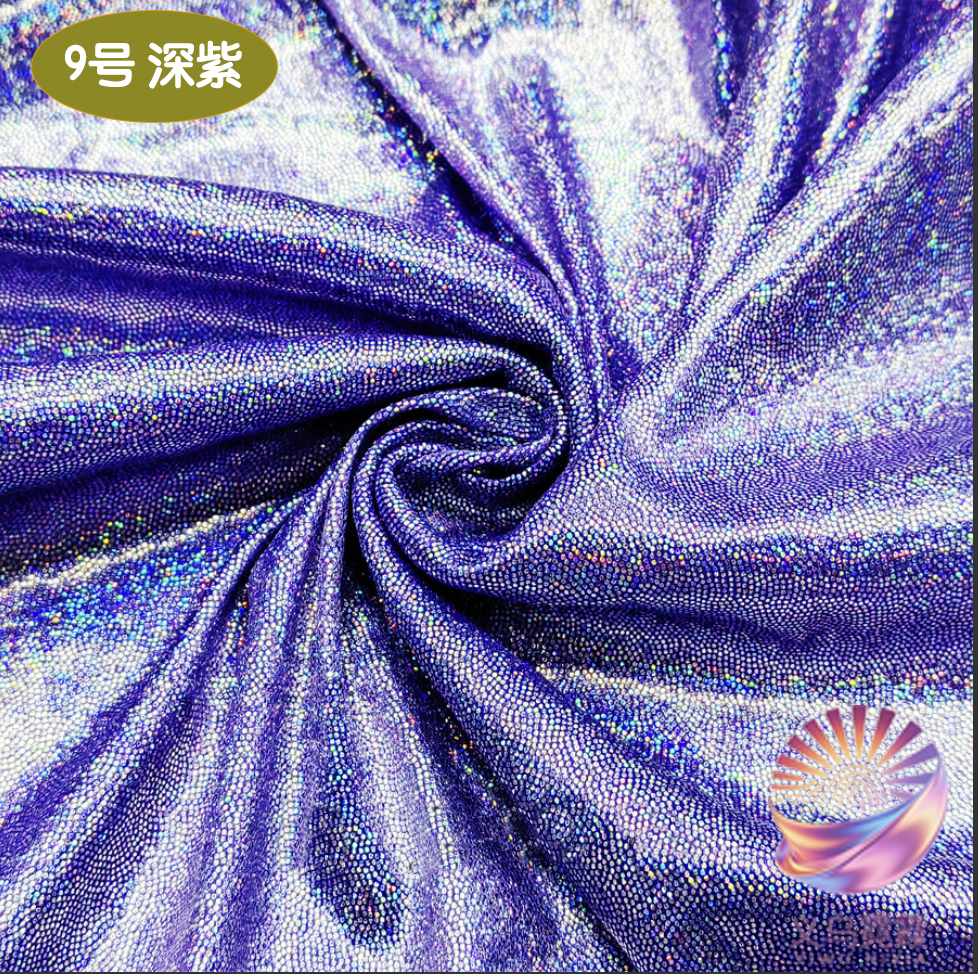
<style>
.page{position:relative;width:978px;height:974px}
.page>*{position:absolute;margin:0}
.t1{font:49.1px "STYuanti-SC-Bold";color:#ffffff;scale:0.97 1}
.t2{font:84.6px "STBaoliSC-Regular";color:#ffffff;scale:0.97 1}
</style>
<div class="page">
<p class="t1" style="left:65px;top:40px;width:177px;height:49px"><span class="t2">         </span>9号 深紫</p>
</div>
